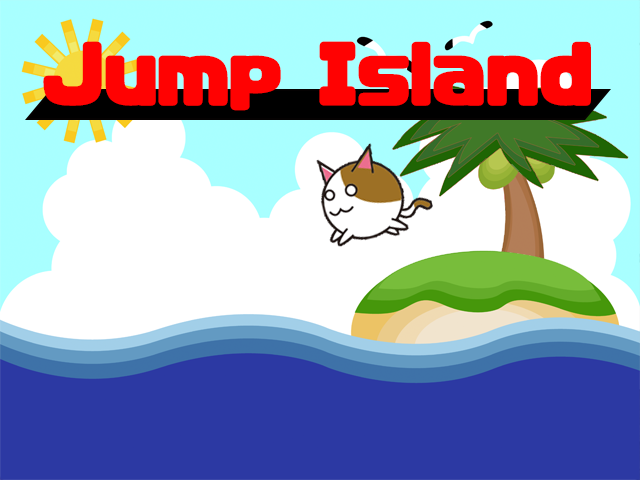
<style>
.page{position:relative;width:640px;height:480px;background:#ffffff}
.page>*{position:absolute;margin:0}
.t1{font:72px "CP-Font";color:#ff0202}
</style>
<div class="page">
<p class="t1" style="left:43px;top:41px;width:548px;height:70px">Jump Island</p>
</div>
